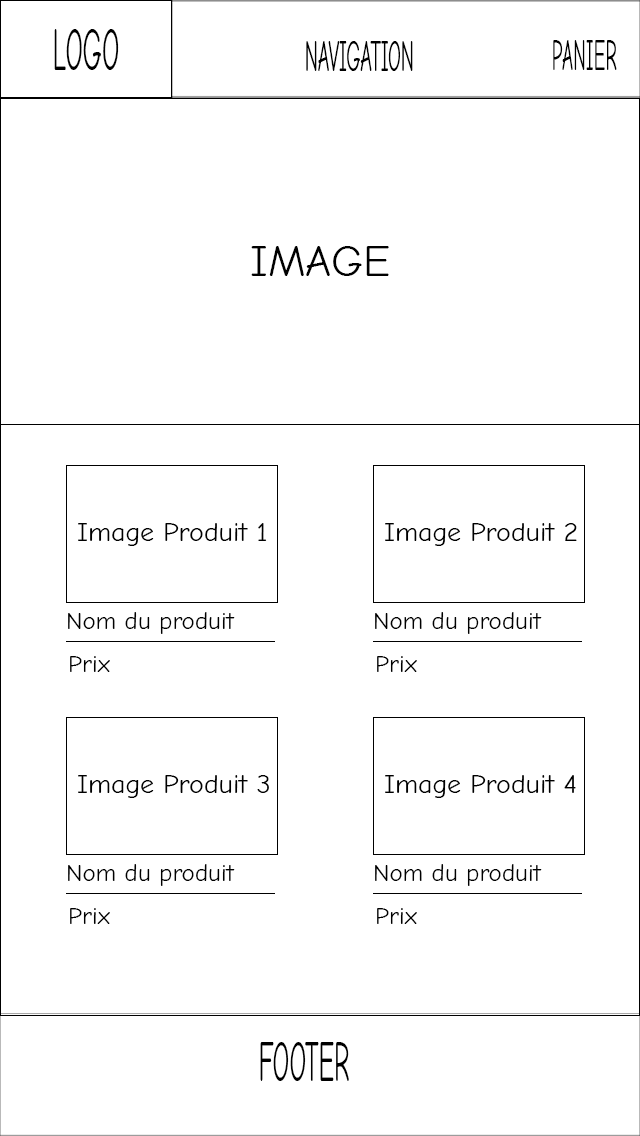
<style>
.page{position:relative;width:640px;height:1136px;background:#ffffff}
.page>*{position:absolute;margin:0}
.t1{font:61.5px "ComicNeue-Regular";color:#000000;scale:0.44 1}
.t2{font:45px "ComicNeue-Regular";color:#000000;scale:0.44 1}
.t3{font:44.2px "ComicNeue-Regular";color:#000000;scale:0.44 1}
.t4{font:45px "ComicNeue-Regular";color:#000000}
.t5{font:26.3px "ComicNeue-Regular";color:#000000;scale:1.06 1}
.t6{font:23.6px "ComicNeue-Regular";color:#000000;scale:1.06 1}
.t7{font:59.2px "ComicNeue-Regular";color:#000000;scale:0.44 1}
</style>
<div class="page">
<p class="t1" style="left:54px;top:29px;width:65px;height:41px">LOGO</p>
<p class="t2" style="left:306px;top:41px;width:107px;height:30px">NAVIGATION</p>
<p class="t3" style="left:553px;top:40px;width:64px;height:30px">PANIER</p>
<p class="t4" style="left:251px;top:246px;width:138px;height:30px">IMAGE</p>
<p class="t5" style="left:78px;top:523px;width:189px;height:23px">Image Produit 1</p>
<p class="t5" style="left:385px;top:523px;width:192px;height:23px">Image Produit 2</p>
<p class="t6" style="left:68px;top:612px;width:167px;height:22px">Nom du produit</p>
<p class="t6" style="left:375px;top:612px;width:167px;height:22px">Nom du produit</p>
<p class="t6" style="left:70px;top:656px;width:40px;height:16px">Prix</p>
<p class="t6" style="left:377px;top:656px;width:40px;height:16px">Prix</p>
<p class="t5" style="left:78px;top:775px;width:191px;height:23px">Image Produit 3</p>
<p class="t5" style="left:385px;top:775px;width:191px;height:23px">Image Produit 4</p>
<p class="t6" style="left:68px;top:864px;width:167px;height:22px">Nom du produit</p>
<p class="t6" style="left:375px;top:864px;width:167px;height:22px">Nom du produit</p>
<p class="t6" style="left:70px;top:908px;width:40px;height:16px">Prix</p>
<p class="t6" style="left:377px;top:908px;width:40px;height:16px">Prix</p>
<p class="t7" style="left:260px;top:1042px;width:89px;height:39px">FOOTER</p>
</div>
